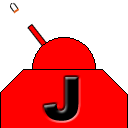
<style>
.page{position:relative;width:128px;height:128px;background:#ffffff}
.page>*{position:absolute;margin:0}
.t1{font:60px "Arial-Black";color:#000000}
</style>
<div class="page">
<p class="t1" style="left:44px;top:77px;width:35px;height:44px">J</p>
</div>
